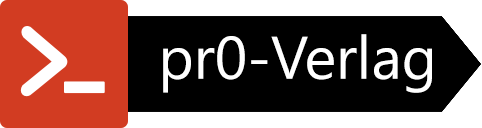
<style>
.page{position:relative;width:482px;height:128px;background:#000000}
.page>*{position:absolute;margin:0}
.t1{font:60px "SegoeUI";color:#ffffff}
</style>
<div class="page">
<p class="t1" style="left:163px;top:34px;width:269px;height:59px">pr0-Verlag</p>
</div>
